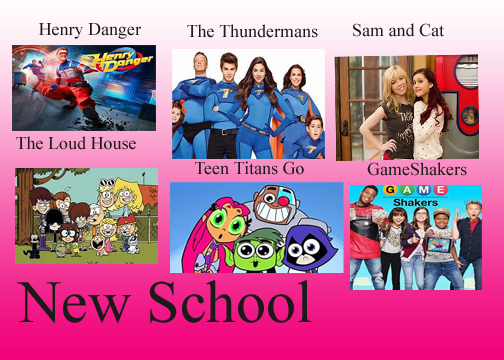
<style>
.page{position:relative;width:504px;height:360px}
.page>*{position:absolute;margin:0}
.t1{font:18px "TimesNewRomanPSMT";color:#1b1a1a}
.t2{font:60px "TimesNewRomanPSMT";color:#1b1a1a}
</style>
<div class="page">
<p class="t1" style="left:38px;top:23px;width:103px;height:16px">Henry Danger</p>
<p class="t1" style="left:187px;top:24px;width:131px;height:14px">The Thundermans</p>
<p class="t1" style="left:353px;top:23px;width:91px;height:14px">Sam and Cat</p>
<p class="t1" style="left:16px;top:136px;width:120px;height:14px">The Loud House</p>
<p class="t1" style="left:195px;top:161px;width:109px;height:14px">Teen Titans Go</p>
<p class="t1" style="left:367px;top:162px;width:100px;height:14px">GameShakers</p>
<p class="t2" style="left:17px;top:280px;width:295px;height:43px">New School</p>
</div>
